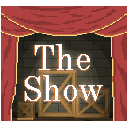
<style>
.page{position:relative;width:128px;height:128px;background:#af4141}
.page>*{position:absolute;margin:0}
.t1{font:35px/31px "CenturySchoolbook";letter-spacing:0.02em;color:#ffffff;scale:0.89 1}
</style>
<div class="page">
<p class="t1" style="left:24px;top:44px;width:78px;height:57px;text-align:center">The<br>Show</p>
<p class="t1" style="left:25px;top:45px;width:78px;height:57px;text-align:center">The<br>Show</p>
<p class="t1" style="left:25px;top:44px;width:78px;height:57px;text-align:center">The<br>Show</p>
</div>
